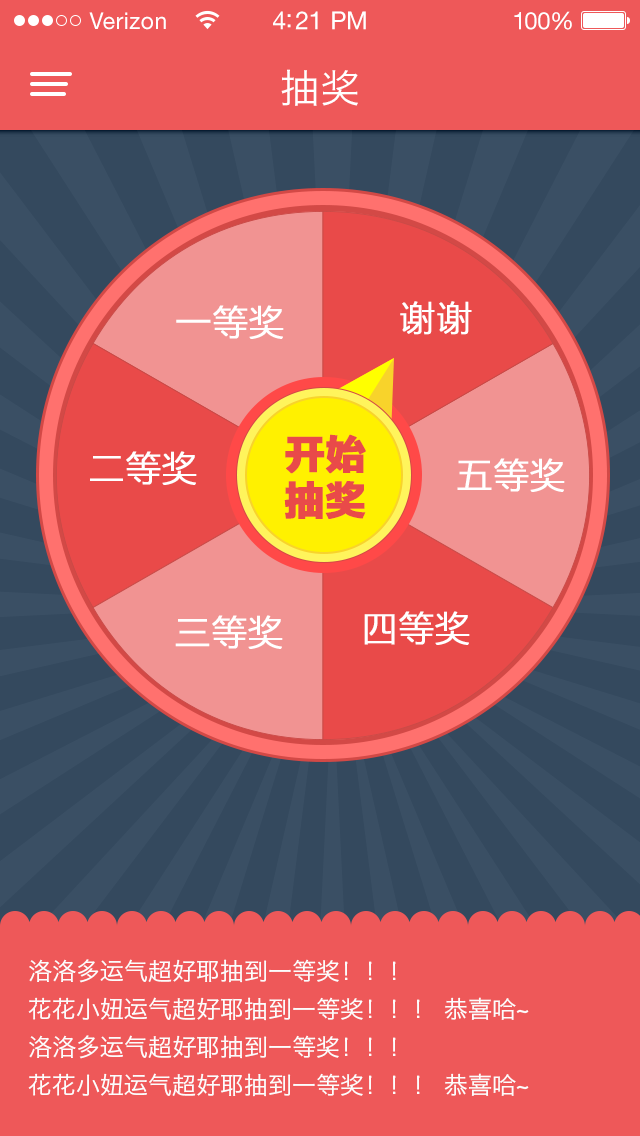
<style>
.page{position:relative;width:640px;height:1136px;background:#ee5859}
.page>*{position:absolute;margin:0}
.t1{font:23px "HelveticaNeueLTStd-Roman";letter-spacing:0.02em;color:#ffffff}
.t2{font:25px "HelveticaNeueLTStd-Roman";letter-spacing:-0.02em;color:#ffffff}
.t3{font:24px "HelveticaNeueLTStd-Roman";letter-spacing:-0.02em;color:#ffffff}
.t4{font:40px "HiraginoSansGB-W3";color:#ffffff}
.t5{font:36px "FZLTXHK";color:#ffffff;font-weight:bold}
.t6{font:40px/46px "FZLTTHJW--GB1-0";color:#e94a49;font-weight:bold}
.t7{font:24px/38px "HiraginoSansGB-W3";color:#fcfcfc}
</style>
<div class="page">
<p class="t1" style="left:89px;top:12px;width:77px;height:18px">Verizon</p>
<p class="t2" style="left:273px;top:11px;width:93px;height:19px">4:21 PM</p>
<p class="t3" style="left:514px;top:11px;width:58px;height:19px">100%</p>
<p class="t4" style="left:281px;top:69px;width:77px;height:37px">抽奖</p>
<p class="t5" style="left:176px;top:305px;width:108px;height:34px">一等奖</p>
<p class="t5" style="left:400px;top:301px;width:72px;height:34px">谢谢</p>
<p class="t6" style="left:284px;top:434px;width:82px;height:85px;text-align:center">开始<br>抽奖</p>
<p class="t5" style="left:90px;top:451px;width:107px;height:34px">二等奖</p>
<p class="t5" style="left:457px;top:458px;width:108px;height:34px">五等奖</p>
<p class="t5" style="left:175px;top:615px;width:108px;height:34px">三等奖</p>
<p class="t5" style="left:364px;top:611px;width:106px;height:34px">四等奖</p>
<p class="t7" style="left:28px;top:959px;width:501px;height:138px">洛洛多运气超好耶抽到一等奖！！！<br>花花小妞运气超好耶抽到一等奖！！！ 恭喜哈~<br>洛洛多运气超好耶抽到一等奖！！！<br>花花小妞运气超好耶抽到一等奖！！！ 恭喜哈~</p>
</div>
